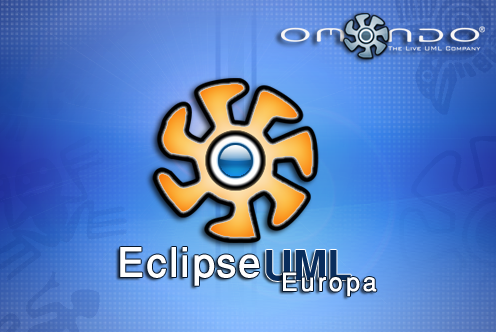
<style>
.page{position:relative;width:496px;height:332px}
.page>*{position:absolute;margin:0}
.t1{font:58px "WinSoftPro-Medium";color:#fefefe}
.t2{font:58px "WinSoftPro-Bold";color:#092d5c}
.t3{font:36px "EstrangeloEdessa";letter-spacing:0.05em;color:#fefefe}
</style>
<div class="page">
<p class="t1" style="left:120px;top:247px;width:140px;height:39px">Eclipse</p>
<p class="t2" style="left:266px;top:250px;width:85px;height:31px">UML</p>
<p class="t3" style="left:283px;top:272px;width:94px;height:25px">Europa</p>
</div>
